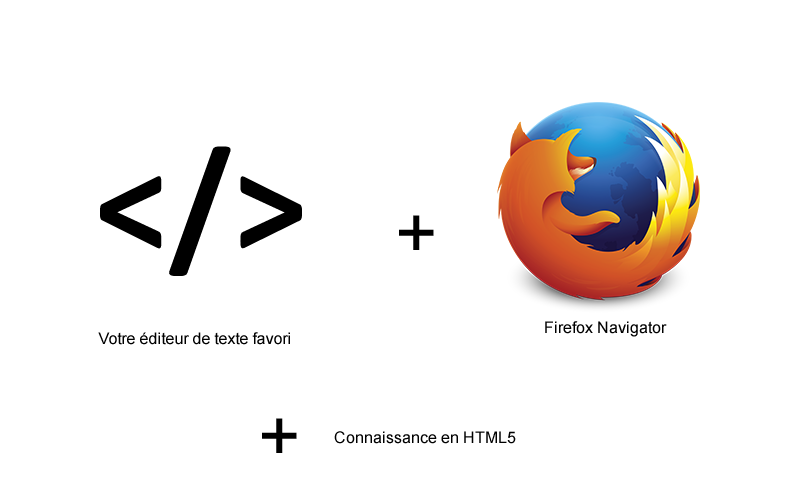
<style>
.page{position:relative;width:800px;height:480px;background:#ffffff}
.page>*{position:absolute;margin:0}
.t1{font:147.9px "Calibri-Bold";color:#000000}
.t2{font:72px "ArialMT";color:#000000}
.t3{font:16px "ArialMT";color:#000000}
</style>
<div class="page">
<p class="t1" style="left:100px;top:146px;width:202px;height:130px">&lt;/&gt;</p>
<p class="t2" style="left:399px;top:215px;width:35px;height:35px">+</p>
<p class="t3" style="left:545px;top:321px;width:122px;height:16px">Firefox Navigator</p>
<p class="t3" style="left:98px;top:332px;width:192px;height:13px">Votre éditeur de texte favori</p>
<p class="t2" style="left:262px;top:418px;width:35px;height:35px">+</p>
<p class="t3" style="left:334px;top:431px;width:182px;height:13px">Connaissance en HTML5</p>
</div>
